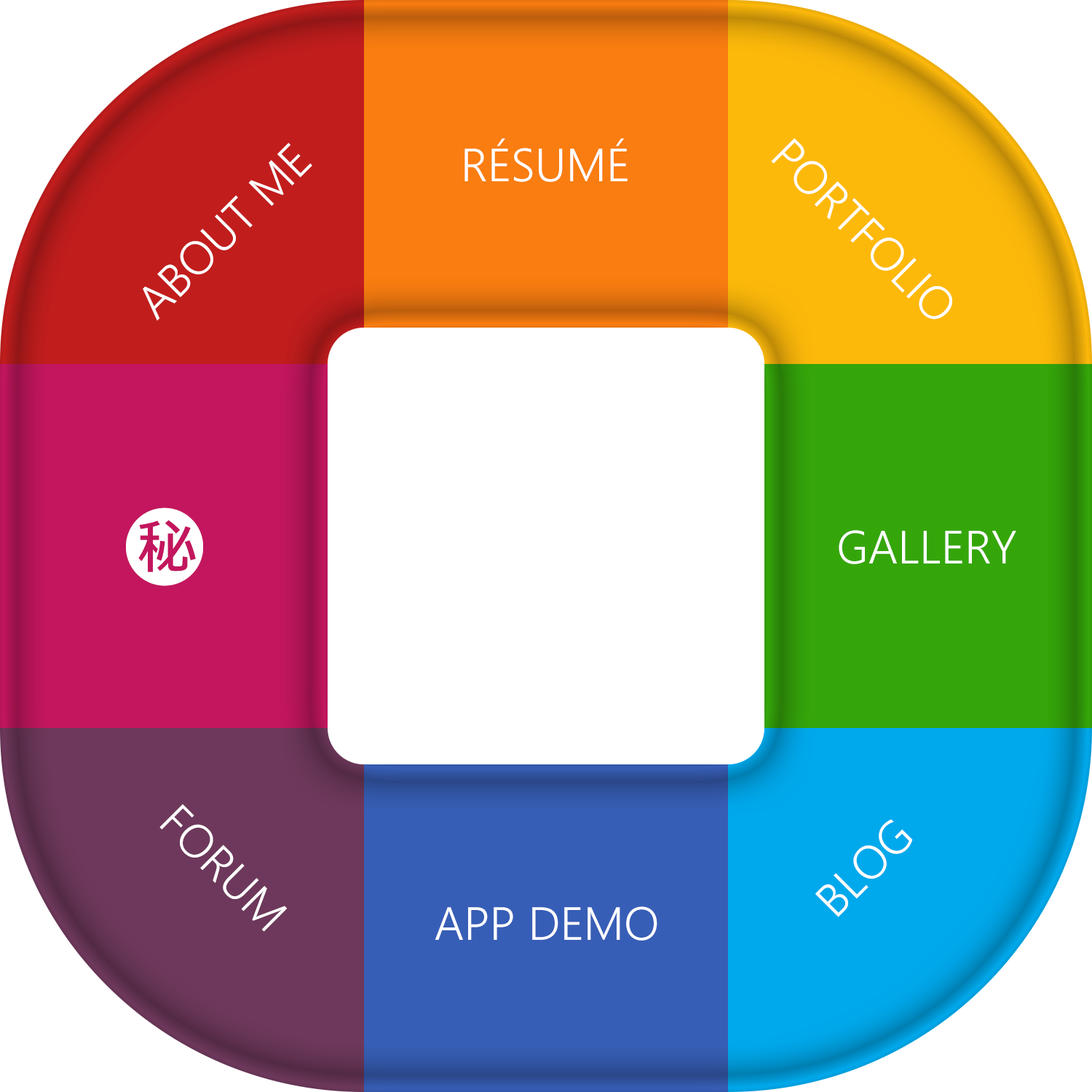
<style>
.page{position:relative;width:1092px;height:1092px;background:#ffffff}
.page>*{position:absolute;margin:0}
.t1{font:46.6px "SegoeUI-Semilight";color:#ffffff;text-transform:uppercase}
.t2{font:46.6px "SegoeUI-Semilight";color:#fefefe;text-transform:uppercase}
.t3{font:77.7px "SegoeUISymbol";color:#ffffff;text-transform:uppercase}
</style>
<div class="page">
<p class="t1" style="left:143px;top:143px;width:169px;height:178px;rotate:-45deg">about me</p>
<p class="t2" style="left:464px;top:138px;width:164px;height:44px">résumé</p>
<p class="t1" style="left:771px;top:138px;width:181px;height:182px;rotate:45deg">portfolio</p>
<p class="t3" style="left:126px;top:507px;width:77px;height:79px">㊙</p>
<p class="t1" style="left:839px;top:530px;width:177px;height:34px">gallery</p>
<p class="t1" style="left:159px;top:804px;width:129px;height:128px;rotate:45deg">forum</p>
<p class="t1" style="left:815px;top:819px;width:98px;height:98px;rotate:-45deg">blog</p>
<p class="t1" style="left:435px;top:906px;width:222px;height:35px">app demo</p>
</div>
